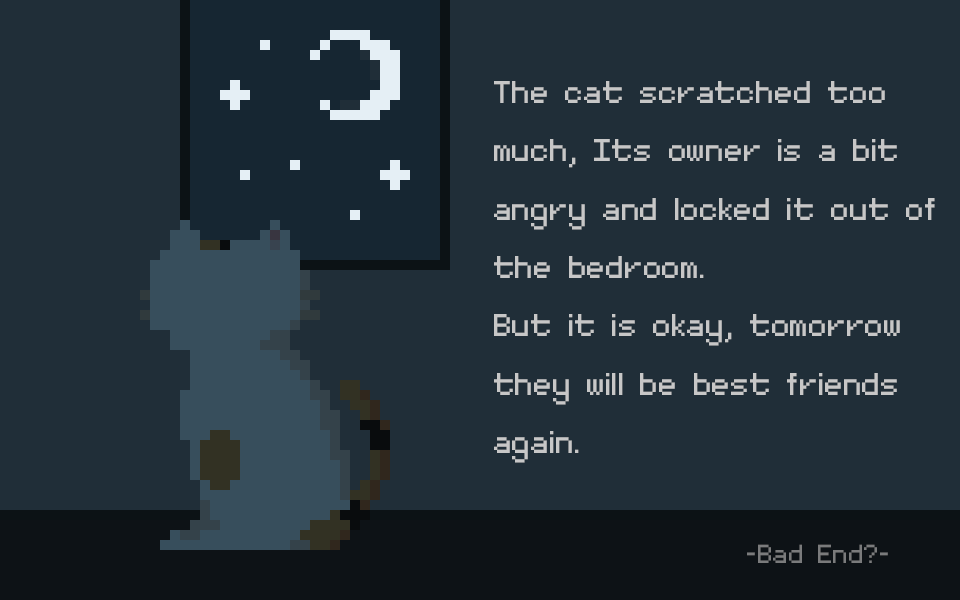
<style>
.page{position:relative;width:960px;height:600px;background:#202e38}
.page>*{position:absolute;margin:0}
.t1{font:12px/58.3px "MinimalFont5x7";color:#c7c7c7}
.t2{font:41.7px "MinimalFont5x7";color:#7a7b7c}
</style>
<div class="page">
<p class="t1" style="left:494px;top:81px;width:441px;height:382px">The cat scratched too much, Its owner is a bit angry and locked it out of the bedroom.<br>But it is okay, tomorrow they will be best friends again.</p>
<p class="t2" style="left:747px;top:544px;width:141px;height:19px">-Bad End?-</p>
</div>
